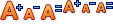
<style>
.page{position:relative;width:113px;height:24px;background:#ffffff}
.page>*{position:absolute;margin:0}
.t1{font:24px "Arial-BoldMT";color:#e68c39}
.t2{font:19px "Arial-BoldMT";color:#e68c39}
.t3{font:15px "Arial-BoldMT";color:#e68c39}
.t4{font:10px "Arial-BoldMT";color:#e68c39}
.t5{font:12px "Arial-BoldMT";color:#e68c39}
.t6{font:14px "Arial-BoldMT";color:#e68c39}
</style>
<div class="page">
<p class="t1" style="left:1px;top:1px;width:17px;height:18px">A</p>
<p class="t2" style="left:41px;top:5px;width:14px;height:14px">A</p>
<p class="t3" style="left:63px;top:1px;width:11px;height:11px">A</p>
<p class="t4" style="left:82px;top:4px;width:8px;height:8px">A</p>
<p class="t5" style="left:97px;top:3px;width:9px;height:9px">A</p>
<p class="t6" style="left:24px;top:9px;width:10px;height:10px">A</p>
</div>
